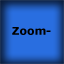
<style>
.page{position:relative;width:64px;height:64px;background:#296ee0}
.page>*{position:absolute;margin:0}
.t1{font:10.8px "Verdana-Bold";color:#000000}
</style>
<div class="page">
<p class="t1" style="left:12px;top:27px;width:39px;height:8px">Zoom-</p>
</div>
